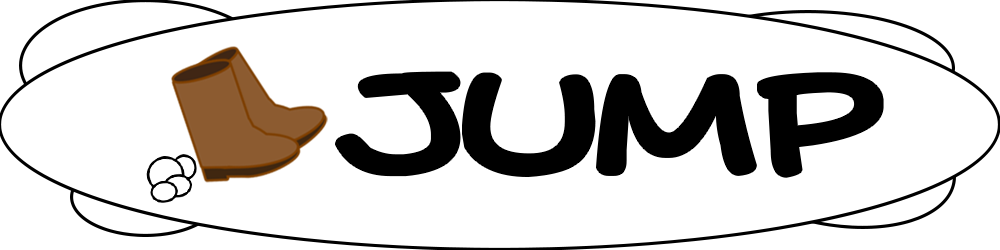
<style>
.page{position:relative;width:1000px;height:250px;background:#ffffff}
.page>*{position:absolute;margin:0}
.t1{font:92px "HeyGorgeous";color:#000000;scale:1.28 1}
</style>
<div class="page">
<p class="t1" style="left:336px;top:72px;width:547px;height:105px">JUMP</p>
</div>
